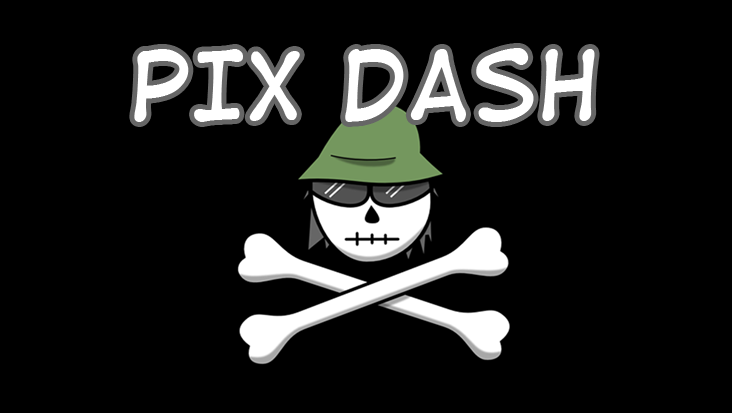
<style>
.page{position:relative;width:732px;height:413px;background:#000000}
.page>*{position:absolute;margin:0}
.t1{font:90px "DigitalStrip";color:#ffffff}
</style>
<div class="page">
<p class="t1" style="left:134px;top:48px;width:461px;height:74px">PIX DASH</p>
</div>
